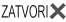
<style>
.page{position:relative;width:66px;height:22px;background:#ffffff}
.page>*{position:absolute;margin:0}
.t1{font:17.2px "ArialNarrow";color:#171717;scale:0.78 1}
</style>
<div class="page">
<p class="t1" style="left:1px;top:5px;width:47px;height:13px">ZATVORI</p>
</div>
